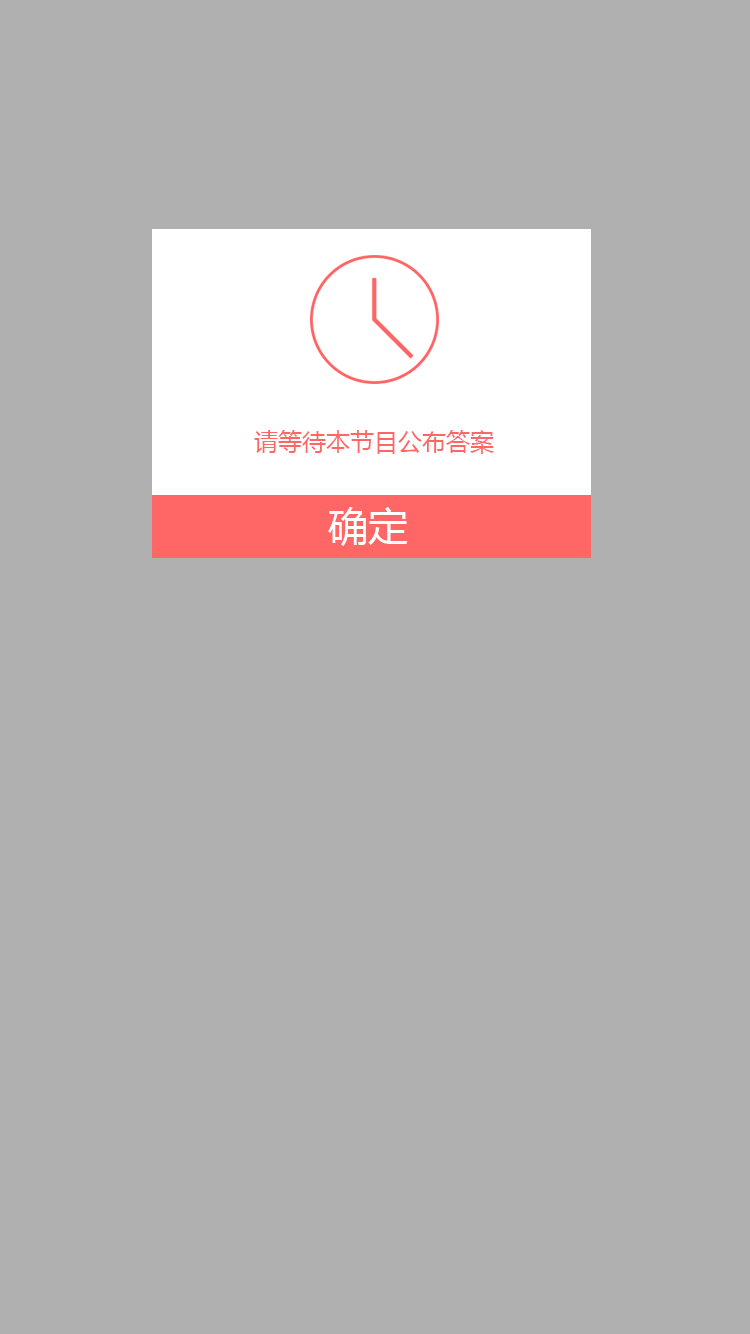
<style>
.page{position:relative;width:750px;height:1334px;background:#b0b0b0}
.page>*{position:absolute;margin:0}
.t1{font:24px "MicrosoftYaHei";color:#ff6666}
.t2{font:40px "MicrosoftYaHei";color:#ffffff}
</style>
<div class="page">
<p class="t1" style="left:254px;top:430px;width:240px;height:24px">请等待本节目公布答案</p>
<p class="t2" style="left:328px;top:507px;width:80px;height:39px">确定</p>
</div>
